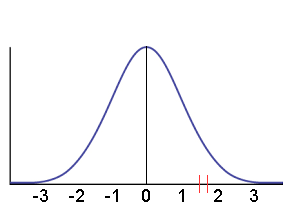
<style>
.page{position:relative;width:288px;height:216px;background:#ffffff}
.page>*{position:absolute;margin:0}
.t1{font:18px "ArialMT";color:#000000}
</style>
<div class="page">
<p class="t1" style="left:33px;top:189px;width:225px;height:13px">-3 -2 -1 0 1 2 3</p>
</div>
